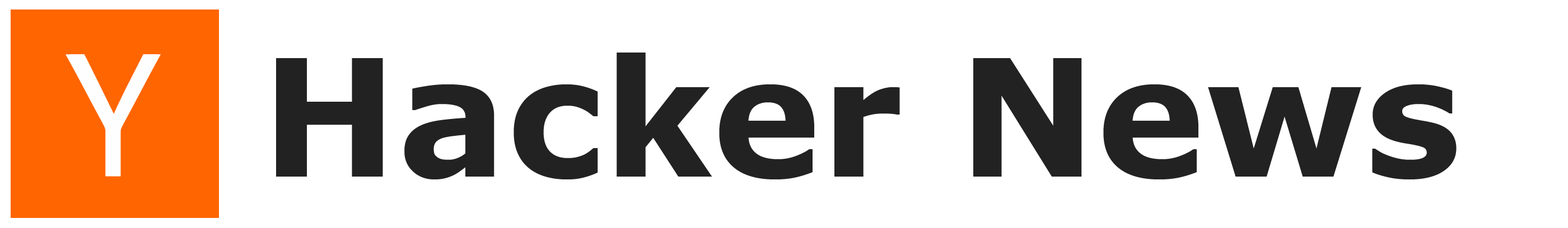
<style>
.page{position:relative;width:1568px;height:228px;background:#ffffff}
.page>*{position:absolute;margin:0}
.t1{font:163.3px "Verdana-Bold";color:#222222}
</style>
<div class="page">
<p class="t1" style="left:276px;top:53px;width:1181px;height:127px">Hacker News</p>
</div>
